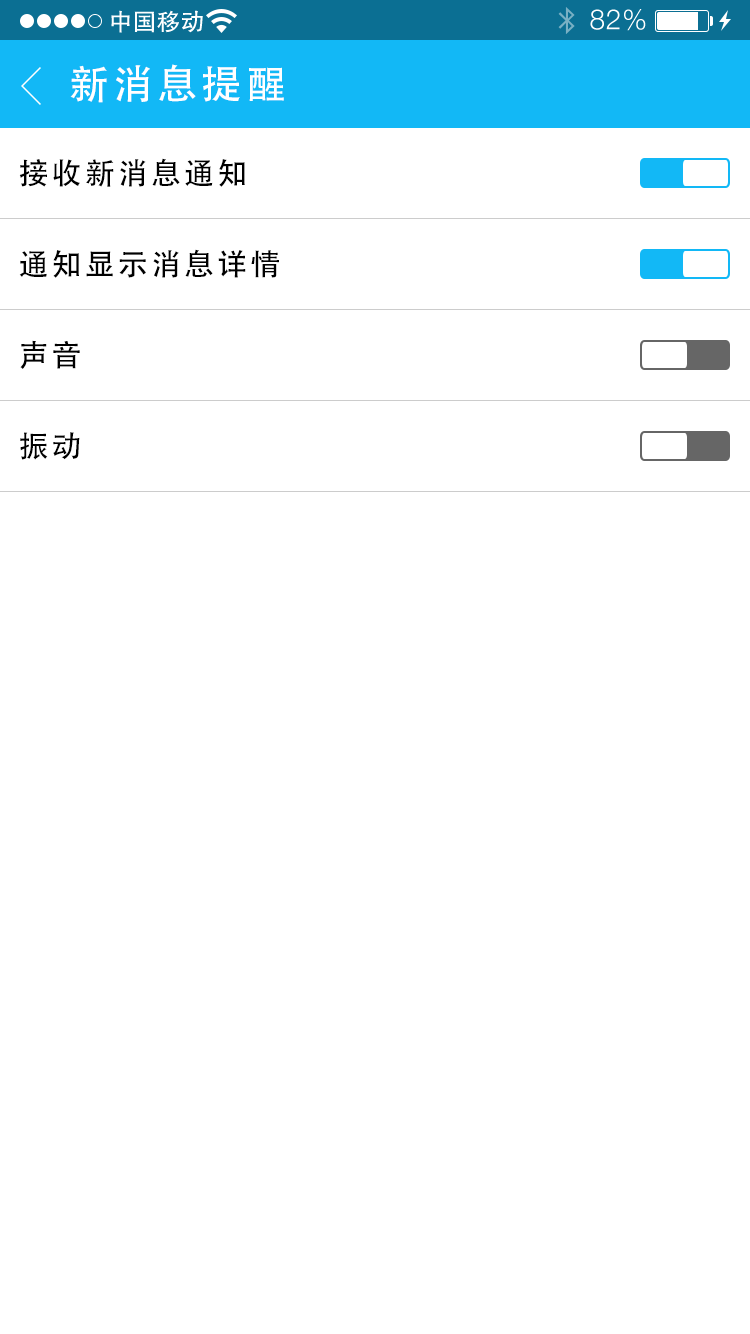
<style>
.page{position:relative;width:750px;height:1334px;background:#ffffff}
.page>*{position:absolute;margin:0}
.t1{font:40px "AdobeHeitiStd-Regular";letter-spacing:0.104em;color:#ffffff}
.t2{font:30px "AdobeHeitiStd-Regular";letter-spacing:0.104em;color:#000000}
</style>
<div class="page">
<p class="t1" style="left:70px;top:64px;width:214px;height:39px">新消息提醒</p>
<p class="t2" style="left:19px;top:158px;width:226px;height:29px">接收新消息通知</p>
<p class="t2" style="left:19px;top:249px;width:260px;height:29px">通知显示消息详情</p>
<p class="t2" style="left:20px;top:340px;width:60px;height:29px">声音</p>
<p class="t2" style="left:20px;top:432px;width:60px;height:28px">振动</p>
</div>
